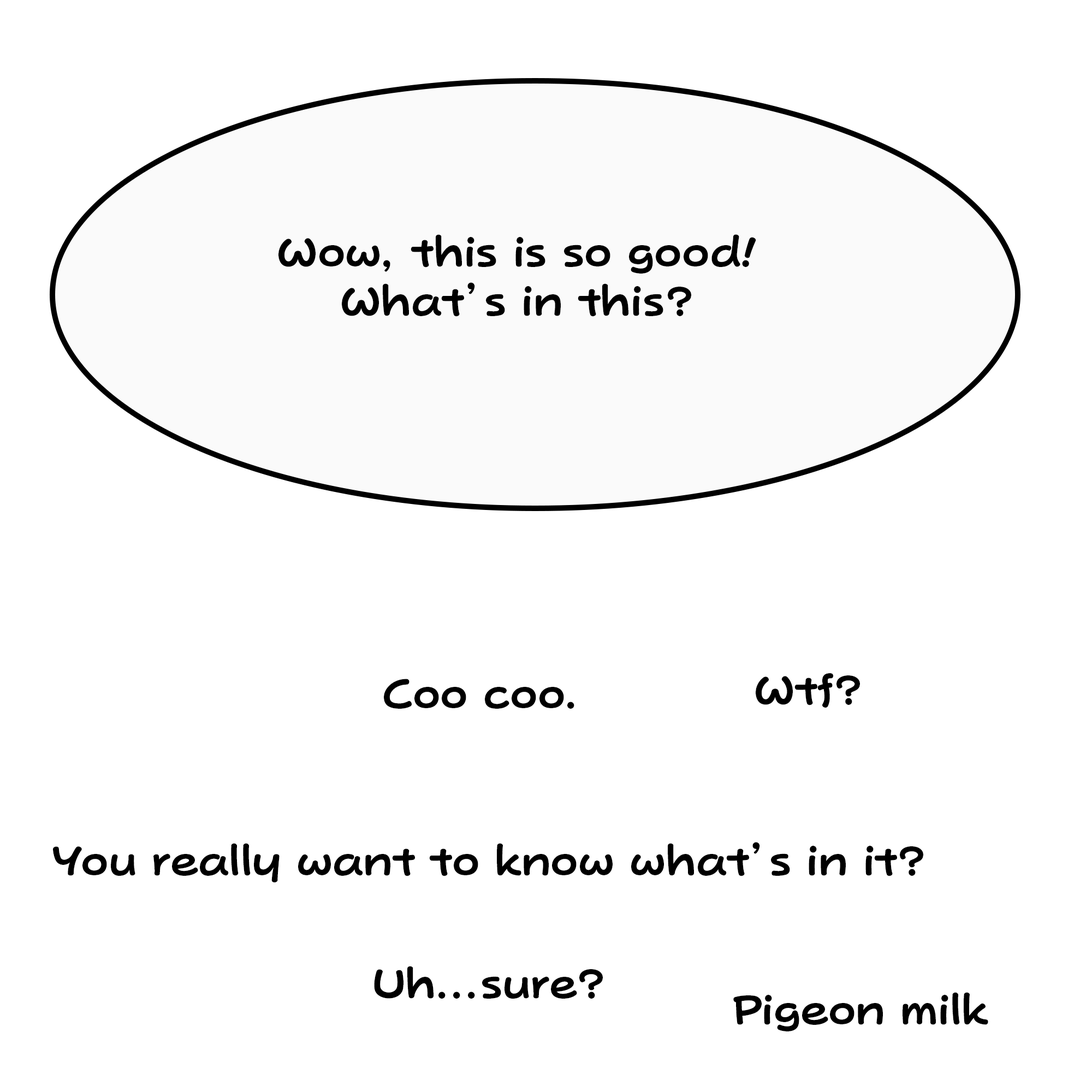
<style>
.page{position:relative;width:1092px;height:1092px;background:#ffffff}
.page>*{position:absolute;margin:0}
.t1{font:40.9px "PopJoyStd-B";color:#000000}
</style>
<div class="page">
<p class="t1" style="left:278px;top:234px;width:478px;height:83px;text-align:center">Wow, this is so good!<br>What’s in this?</p>
<p class="t1" style="left:756px;top:673px;width:104px;height:35px">Wtf?</p>
<p class="t1" style="left:384px;top:679px;width:190px;height:30px">Coo coo.</p>
<p class="t1" style="left:53px;top:842px;width:870px;height:41px">You really want to know what’s in it?</p>
<p class="t1" style="left:374px;top:966px;width:229px;height:33px">Uh...sure?</p>
<p class="t1" style="left:733px;top:992px;width:255px;height:39px">Pigeon milk</p>
</div>
